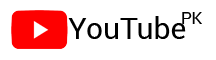
<style>
.page{position:relative;width:216px;height:60px;background:#ffffff}
.page>*{position:absolute;margin:0}
.t1{font:29.9px "Roboto-Regular";color:#000000}
.t2{font:16.7px "Roboto-Regular";color:#000000}
</style>
<div class="page">
<p class="t1" style="left:68px;top:16px;width:118px;height:23px">YouTube</p>
<p class="t2" style="left:182px;top:12px;width:20px;height:12px">PK</p>
</div>
